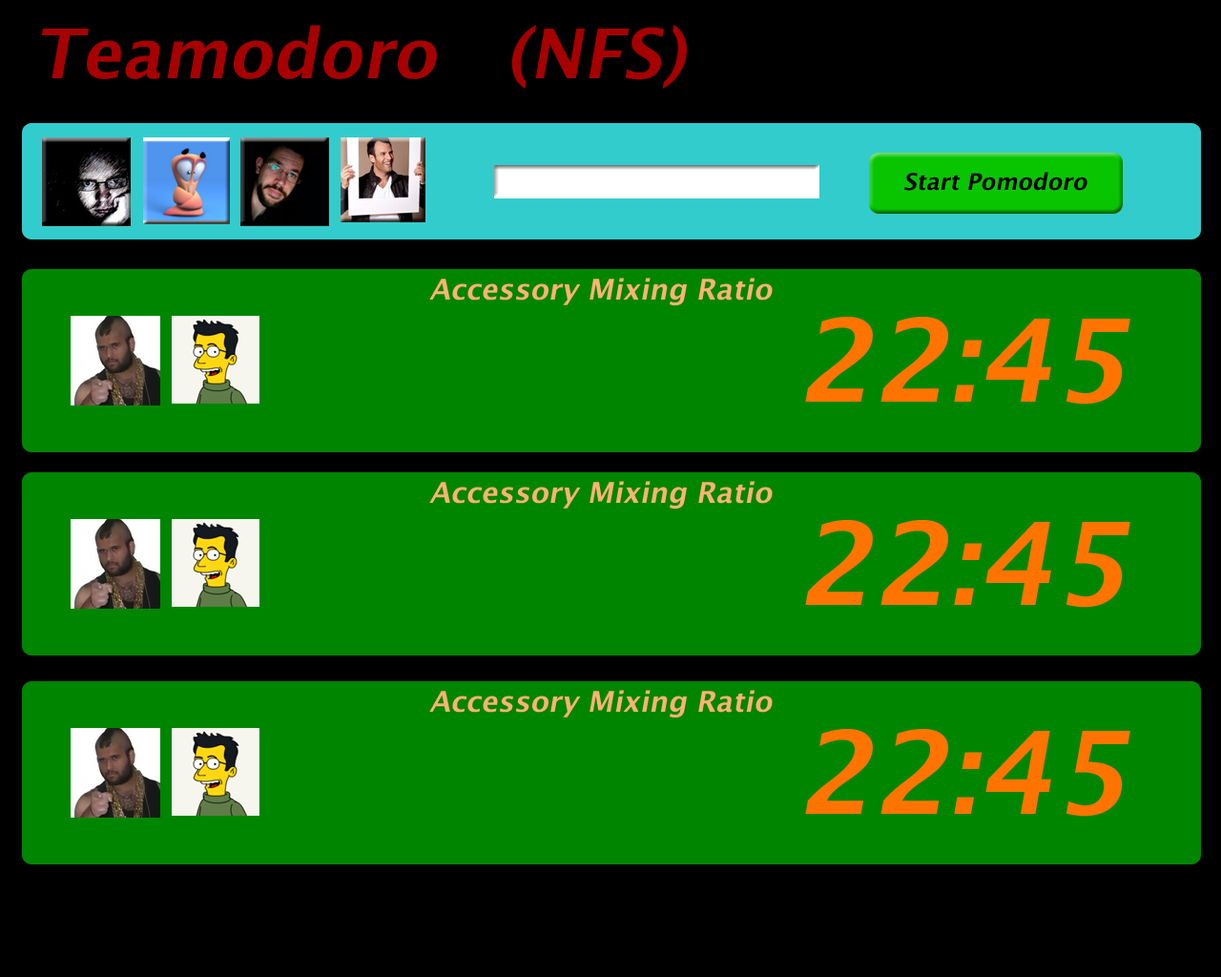
<style>
.page{position:relative;width:1221px;height:977px;background:#008500}
.page>*{position:absolute;margin:0}
.t1{font:68.7px "LucidaGrande-Bold";color:#a60000;font-style:italic}
.t2{font:22.9px "LucidaGrande-Bold";color:#000000;font-style:italic}
.t3{font:28.6px "LucidaGrande-Bold";color:#ffb273;font-style:italic}
.t4{font:114.5px "LucidaGrande-Bold";color:#ff7400;font-style:italic}
</style>
<div class="page">
<p class="t1" style="left:41px;top:25px;width:646px;height:64px">Teamodoro   (NFS)</p>
<p class="t2" style="left:904px;top:172px;width:183px;height:19px">Start Pomodoro</p>
<p class="t3" style="left:429px;top:278px;width:344px;height:28px">Accessory Mixing Ratio</p>
<p class="t4" style="left:805px;top:317px;width:325px;height:87px">22:45</p>
<p class="t3" style="left:429px;top:481px;width:344px;height:28px">Accessory Mixing Ratio</p>
<p class="t4" style="left:805px;top:520px;width:325px;height:88px">22:45</p>
<p class="t3" style="left:429px;top:690px;width:344px;height:28px">Accessory Mixing Ratio</p>
<p class="t4" style="left:805px;top:729px;width:325px;height:87px">22:45</p>
</div>
